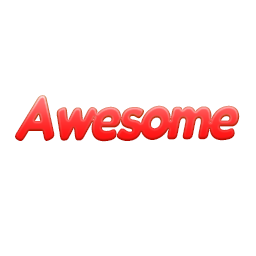
<style>
.page{position:relative;width:256px;height:256px;background:#ffffff}
.page>*{position:absolute;margin:0}
.t1{font:66px "Fredoka-Bold";letter-spacing:-0.06em;scale:0.84 1}
</style>
<div class="page">
<p class="t1" style="left:15px;top:95px;width:225px;height:47px">Awesome</p>
</div>
